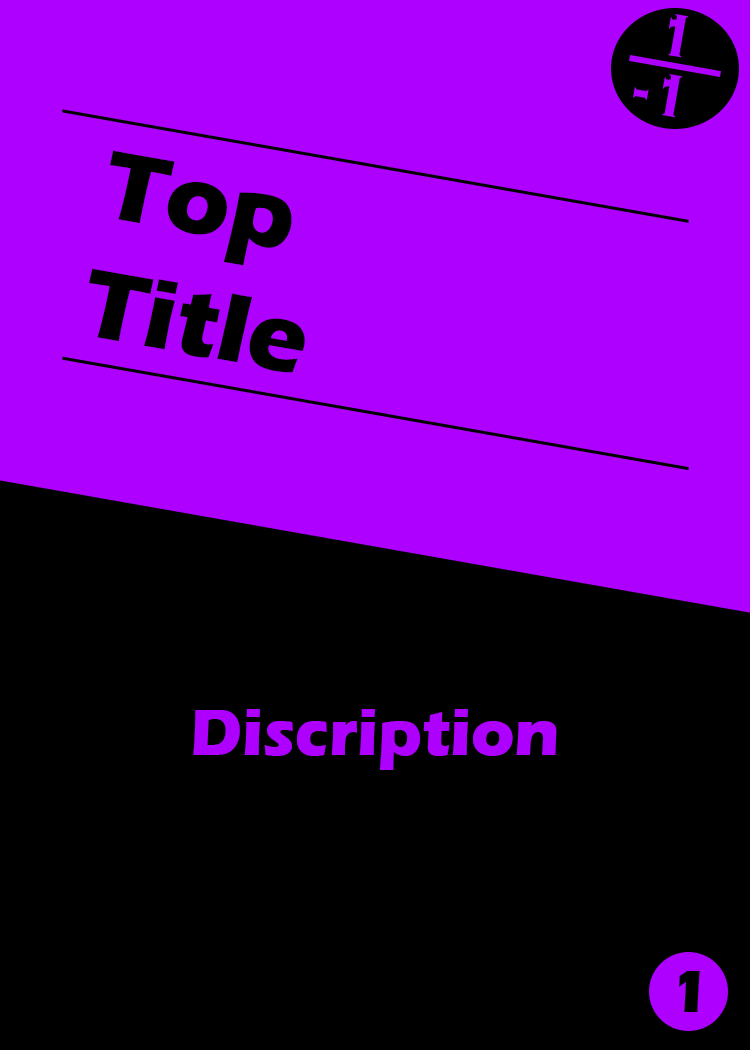
<style>
.page{position:relative;width:750px;height:1050px;background:#ae00ff}
.page>*{position:absolute;margin:0}
.t1{font:62.5px "CopperplateGothic-Bold";color:#ae00ff}
.t2{font:100px "ErasITC-Bold";color:#000000}
.t3{font:66.7px "ErasITC-Bold";color:#ae00ff}
.t4{font:62.5px "ErasITC-Bold";letter-spacing:-0.1em;color:#000000}
</style>
<div class="page">
<p class="t1" style="left:668px;top:14px;width:21px;height:44px;rotate:10deg">1</p>
<p class="t1" style="left:633px;top:74px;width:50px;height:44px;rotate:10deg">-1</p>
<p class="t2" style="left:89px;top:150px;width:216px;height:223px;rotate:10deg">Top<br>Title</p>
<p class="t3" style="left:193px;top:709px;width:364px;height:61px">Discription</p>
<p class="t4" style="left:679px;top:971px;width:21px;height:41px">1</p>
</div>
